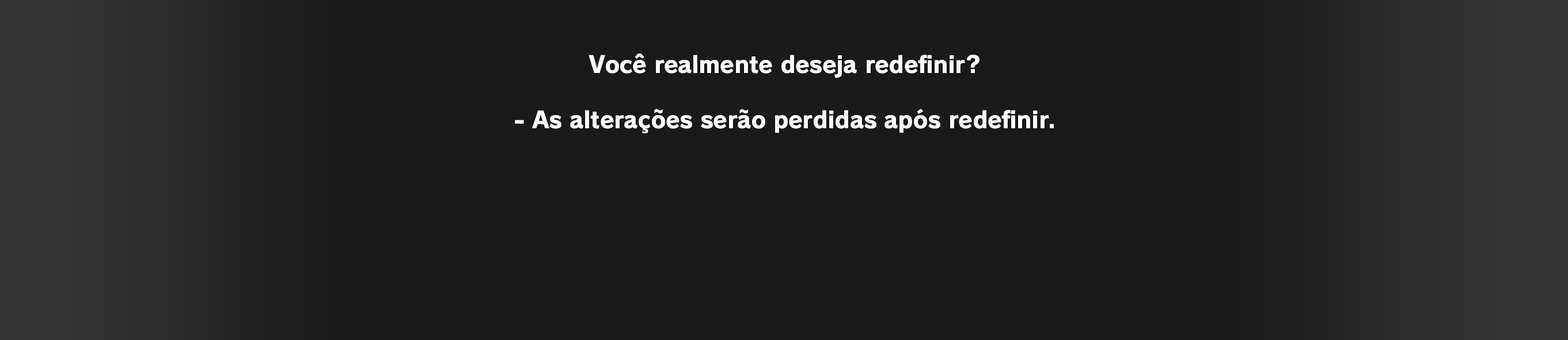
<style>
.page{position:relative;width:1568px;height:340px;background:#1a1a1a}
.page>*{position:absolute;margin:0}
.t1{font:23px "RodinPro-EB";letter-spacing:-0.015em;color:#fbfafb}
</style>
<div class="page">
<p class="t1" style="left:589px;top:54px;width:390px;height:24px">Você realmente deseja redefinir?</p>
<p class="t1" style="left:515px;top:109px;width:539px;height:25px">- As alterações serão perdidas após redefinir.</p>
</div>
